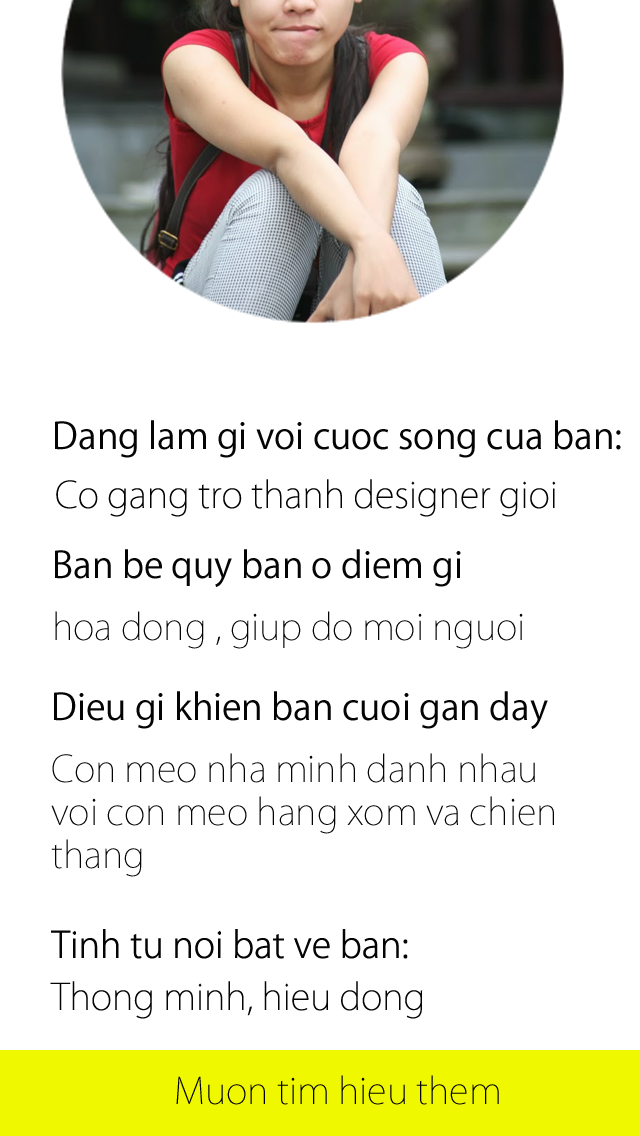
<style>
.page{position:relative;width:640px;height:1136px;background:#ffffff}
.page>*{position:absolute;margin:0}
.t1{font:36px "KozGoPro-Regular";color:#040404}
.t2{font:36px "KozGoPro-ExtraLight";color:#040404}
.t3{font:36px "KozGoPro-Light";color:#040404}
.t4{font:36px "KozGoPro-ExtraLight";color:#010101}
</style>
<div class="page">
<p class="t1" style="left:55px;top:420px;width:566px;height:38px">Dang lam gi voi cuoc song cua ban:</p>
<p class="t2" style="left:56px;top:479px;width:500px;height:38px">Co gang tro thanh designer gioi</p>
<p class="t1" style="left:55px;top:549px;width:406px;height:38px">Ban be quy ban o diem gi</p>
<p class="t2" style="left:55px;top:611px;width:468px;height:38px">hoa dong , giup do moi nguoi</p>
<p class="t1" style="left:54px;top:691px;width:494px;height:38px">Dieu gi khien ban cuoi gan day</p>
<p class="t2" style="left:51px;top:753px;width:503px;height:124px">Con meo nha minh danh nhau <br>voi con meo hang xom va chien <br>thang</p>
<p class="t3" style="left:51px;top:929px;width:357px;height:30px">Tinh tu noi bat ve ban:</p>
<p class="t2" style="left:50px;top:981px;width:373px;height:38px">Thong minh, hieu dong</p>
<p class="t4" style="left:176px;top:1075px;width:323px;height:30px">Muon tim hieu them</p>
</div>
